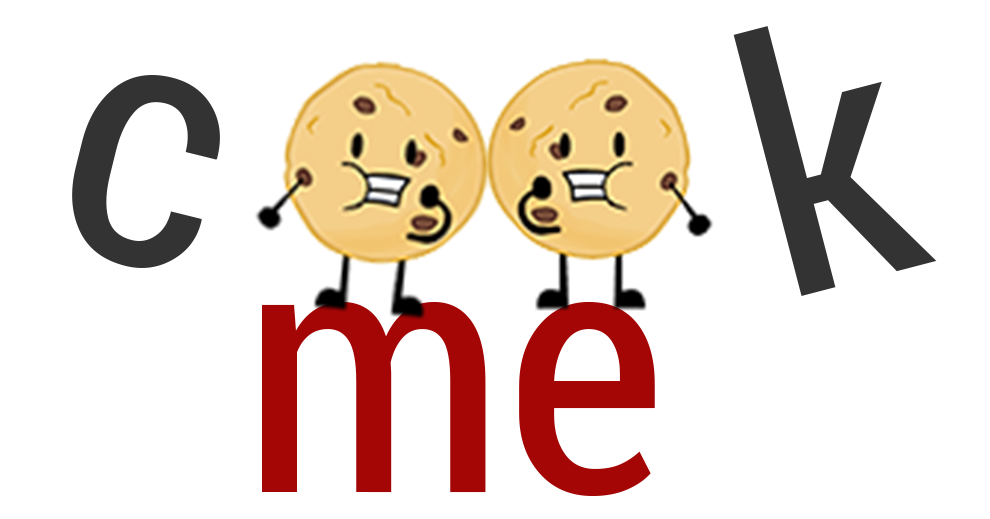
<style>
.page{position:relative;width:990px;height:519px;background:#ffffff}
.page>*{position:absolute;margin:0}
.t1{font:353.8px "RobotoCondensed-Regular";color:#333333}
.t2{font:353.9px "RobotoCondensed-Regular";color:#a40505}
</style>
<div class="page">
<p class="t1" style="left:733px;top:26px;width:204px;height:270px;rotate:-15deg">k</p>
<p class="t1" style="left:72px;top:75px;width:148px;height:193px;rotate:14deg">c</p>
<p class="t2" style="left:262px;top:301px;width:393px;height:195px">me</p>
</div>
